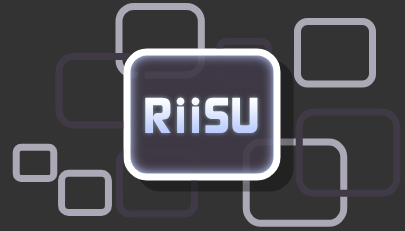
<style>
.page{position:relative;width:405px;height:231px;background:#333333}
.page>*{position:absolute;margin:0}
.t1{font:45px "SolHeavy"}
</style>
<div class="page">
<p class="t1" style="left:145px;top:97px;width:113px;height:36px">RiiSU</p>
</div>
